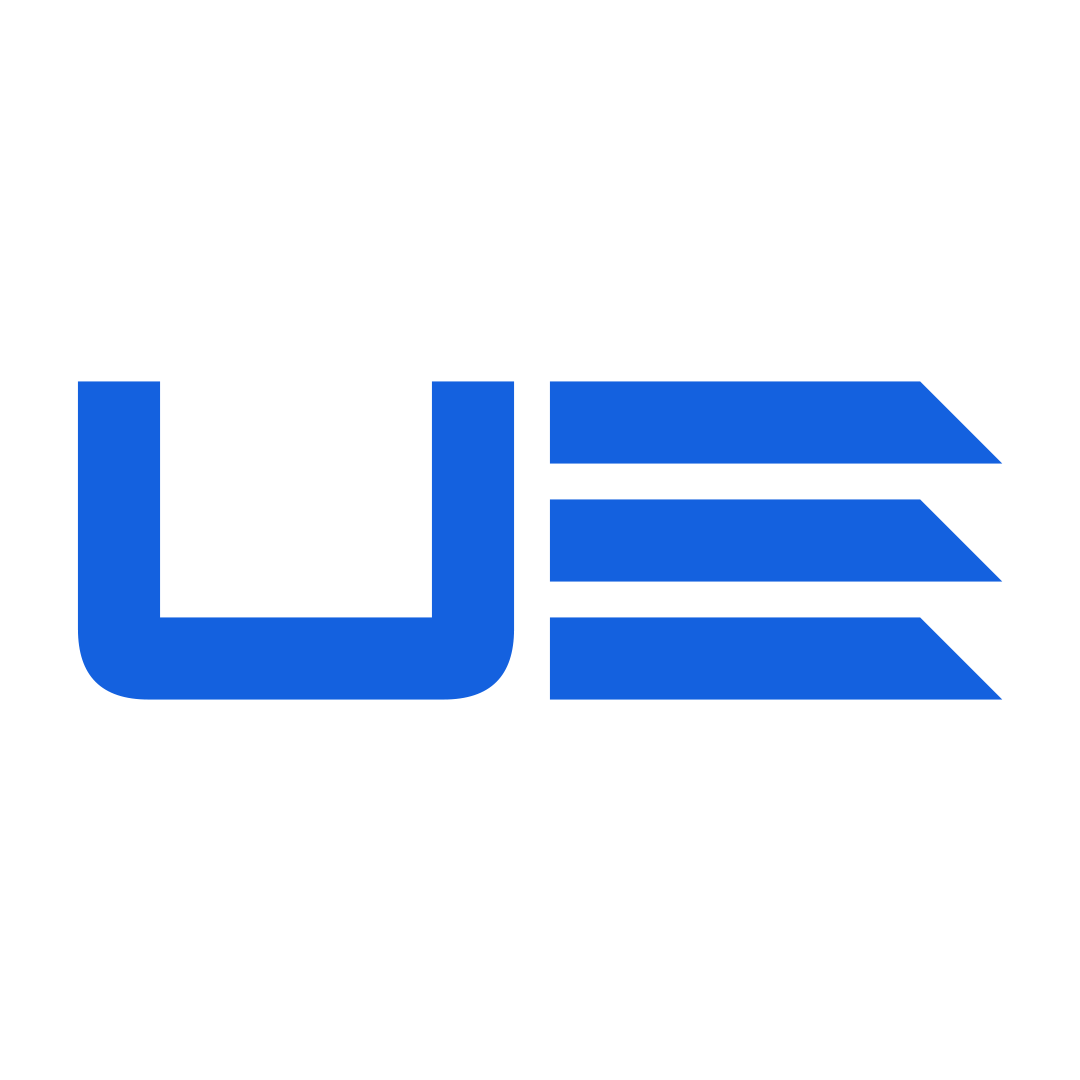
<style>
.page{position:relative;width:1080px;height:1080px;background:#ffffff}
.page>*{position:absolute;margin:0}
.t1{font:472px "AlienMine";color:#1461df}
</style>
<div class="page">
<p class="t1" style="left:77px;top:381px;width:926px;height:319px">UE</p>
</div>
